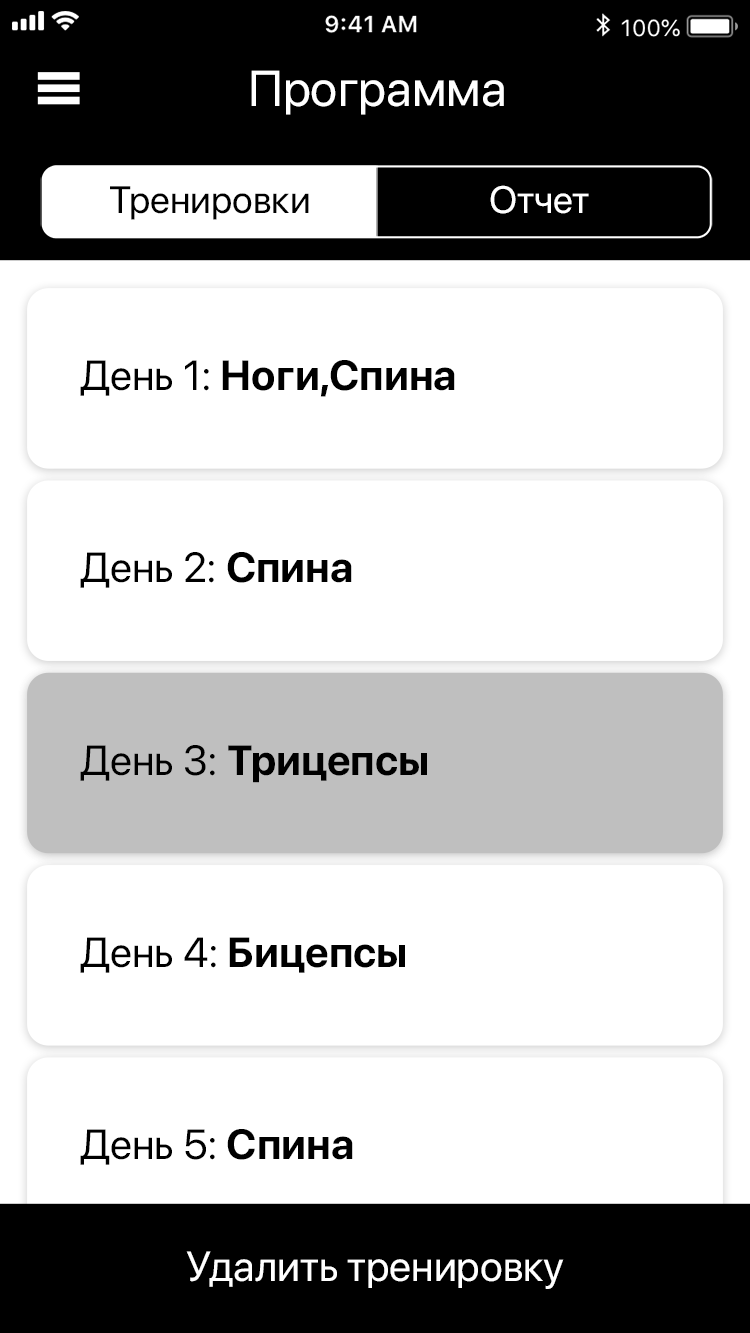
<style>
.page{position:relative;width:750px;height:1333px;background:#ffffff}
.page>*{position:absolute;margin:0}
.t1{font:50px "SFProDisplay-Regular";color:#ffffff}
.t2{font:38px "SFProDisplay-Regular";color:#ffffff}
.t3{font:38px "SFProDisplay-Regular";color:#000000}
.t4{font:42px "SFProDisplay-Bold";color:#000000}
.t5{font:42px "SFProDisplay-Regular";color:#000000}
.t6{font:42px "SFProDisplay-Regular";color:#ffffff}
</style>
<div class="page">
<p class="t1" style="left:251px;top:70px;width:253px;height:45px">Программа</p>
<p class="t2" style="left:490px;top:185px;width:99px;height:29px">Отчет</p>
<p class="t3" style="left:110px;top:186px;width:199px;height:34px">Тренировки</p>
<p class="t4" style="left:80px;top:360px;width:375px;height:37px"><span class="t5">День 1: </span>Ноги,Спина</p>
<p class="t5" style="left:80px;top:552px;width:272px;height:36px">День 2: <span class="t4">Спина</span></p>
<p class="t4" style="left:80px;top:745px;width:347px;height:38px"><span class="t5">День 3: </span>Трицепсы</p>
<p class="t5" style="left:80px;top:937px;width:325px;height:36px">День 4: <span class="t4">Бицепсы</span></p>
<p class="t5" style="left:80px;top:1129px;width:273px;height:36px">День 5: <span class="t4">Спина</span></p>
<p class="t6" style="left:186px;top:1251px;width:378px;height:38px">Удалить тренировку</p>
</div>
